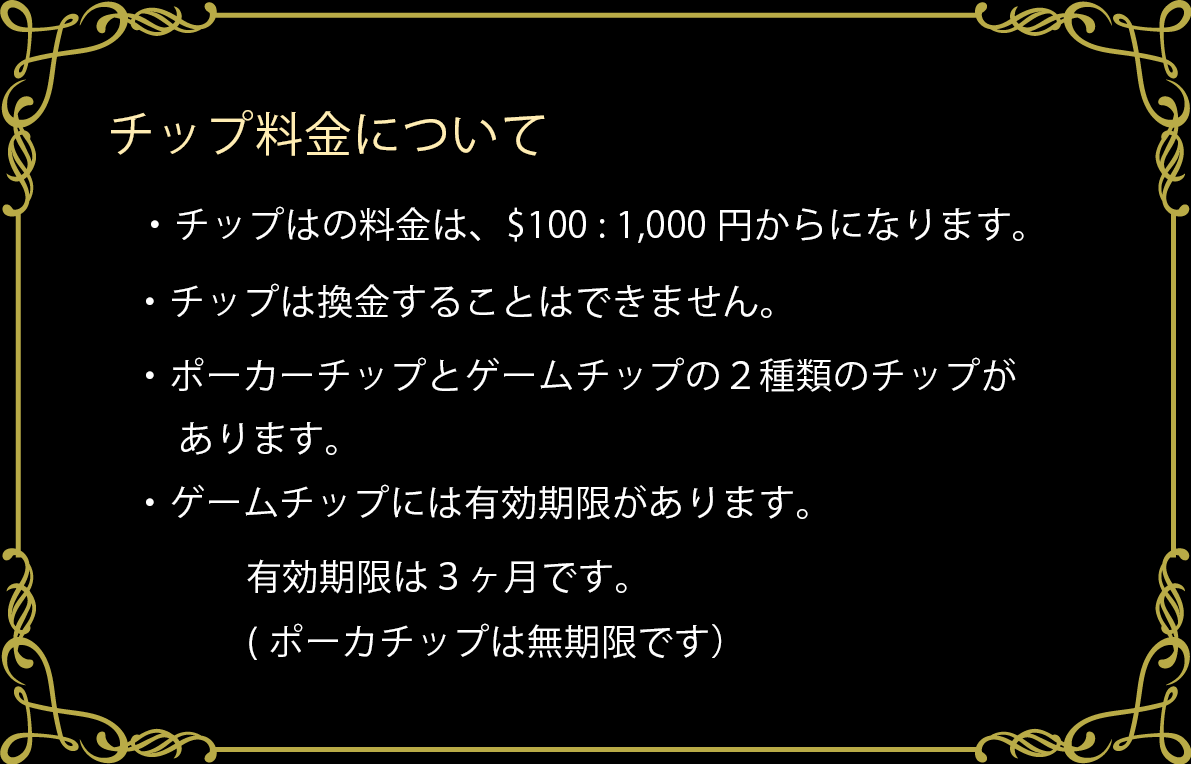
<style>
.page{position:relative;width:1191px;height:764px;background:#000000}
.page>*{position:absolute;margin:0}
.t1{font:48px "KozGoPr6N-Regular";letter-spacing:0.025em;color:#ffedb3}
.t2{font:36px "KozGoPr6N-Regular";letter-spacing:0.025em;color:#ffffff}
</style>
<div class="page">
<p class="t1" style="left:111px;top:110px;width:434px;height:46px">チップ料金について</p>
<p class="t2" style="left:151px;top:206px;width:873px;height:37px">・チップはの料金は、$100 : 1,000円からになります。</p>
<p class="t2" style="left:146px;top:283px;width:626px;height:35px">・チップは換金することはできません。</p>
<p class="t2" style="left:146px;top:357px;width:870px;height:98px">・ポーカーチップとゲームチップの２種類のチップが<br>　あります。</p>
<p class="t2" style="left:146px;top:484px;width:662px;height:36px">・ゲームチップには有効期限があります。</p>
<p class="t2" style="left:247px;top:559px;width:380px;height:35px">有効期限は３ヶ月です。</p>
<p class="t2" style="left:249px;top:623px;width:473px;height:37px">(ポーカチップは無期限です）</p>
</div>
